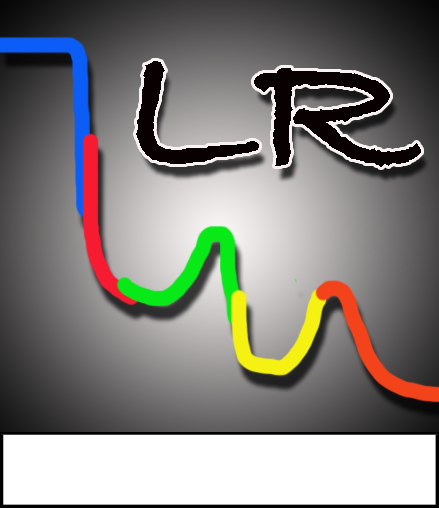
<style>
.page{position:relative;width:439px;height:508px}
.page>*{position:absolute;margin:0}
.t1{font:192px "BradleyHandITCTTBold";color:#090101;scale:1.08 1}
</style>
<div class="page">
<p class="t1" style="left:136px;top:61px;width:285px;height:106px">LR</p>
</div>
